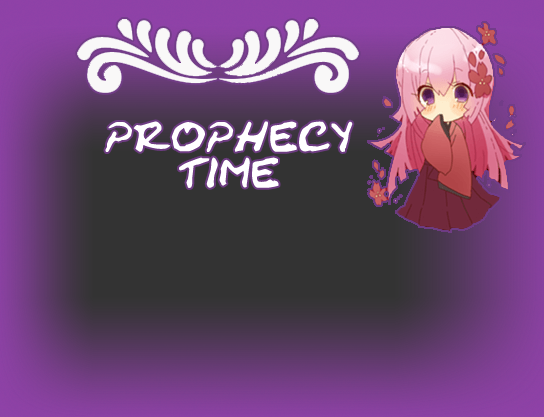
<style>
.page{position:relative;width:544px;height:417px}
.page>*{position:absolute;margin:0}
.t1{font:30px "CrackedJohnnie";letter-spacing:0.05em;color:#ffffff}
</style>
<div class="page">
<p class="t1" style="left:105px;top:121px;width:248px;height:67px;text-align:center">PROPHECY<br>TIME</p>
</div>
